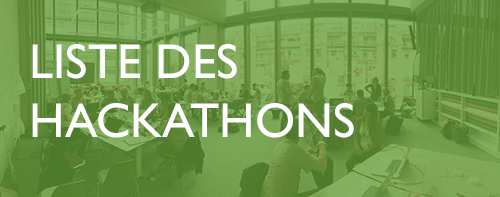
<style>
.page{position:relative;width:500px;height:197px}
.page>*{position:absolute;margin:0}
.t1{font:48.9px "GillSans";color:#ffffff}
</style>
<div class="page">
<p class="t1" style="left:32px;top:44px;width:322px;height:94px">LISTE DES <br>HACKATHONS</p>
</div>
